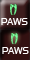
<style>
.page{position:relative;width:30px;height:60px}
.page>*{position:absolute;margin:0}
.t1{font:10.7px "SimianText-Orangutan";color:#ffffff}
</style>
<div class="page">
<p class="t1" style="left:1px;top:18px;width:27px;height:7px">PAWS</p>
<p class="t1" style="left:2px;top:47px;width:27px;height:7px">PAWS</p>
</div>
